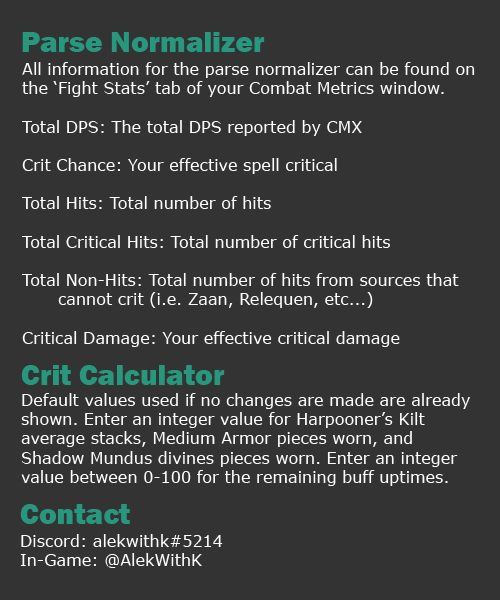
<style>
.page{position:relative;width:500px;height:600px;background:#333333}
.page>*{position:absolute;margin:0}
.t1{font:30px "FranklinGothic-Heavy";color:#27977e}
.t2{font:16px "Verdana";color:#ffffff}
</style>
<div class="page">
<p class="t1" style="left:22px;top:32px;width:243px;height:20px">Parse Normalizer</p>
<p class="t2" style="left:22px;top:62px;width:453px;height:285px">All information for the parse normalizer can be found on <br>the ‘Fight Stats’ tab of your Combat Metrics window.<br><br>Total DPS: The total DPS reported by CMX<br><br>Crit Chance: Your effective spell critical<br><br>Total Hits: Total number of hits<br><br>Total Critical Hits: Total number of critical hits<br><br>Total Non-Hits: Total number of hits from sources that <br> cannot crit (i.e. Zaan, Relequen, etc...)<br><br>Critical Damage: Your effective critical damage</p>
<p class="t1" style="left:21px;top:365px;width:204px;height:20px">Crit Calculator</p>
<p class="t2" style="left:21px;top:393px;width:449px;height:93px">Default values used if no changes are made are already<br>shown. Enter an integer value for Harpooner’s Kilt <br>average stacks, Medium Armor pieces worn, and <br>Shadow Mundus divines pieces worn. Enter an integer<br>value between 0-100 for the remaining buff uptimes.</p>
<p class="t1" style="left:20px;top:504px;width:110px;height:20px">Contact</p>
<p class="t2" style="left:20px;top:534px;width:203px;height:34px">Discord: alekwithk#5214<br>In-Game: @AlekWithK</p>
</div>
